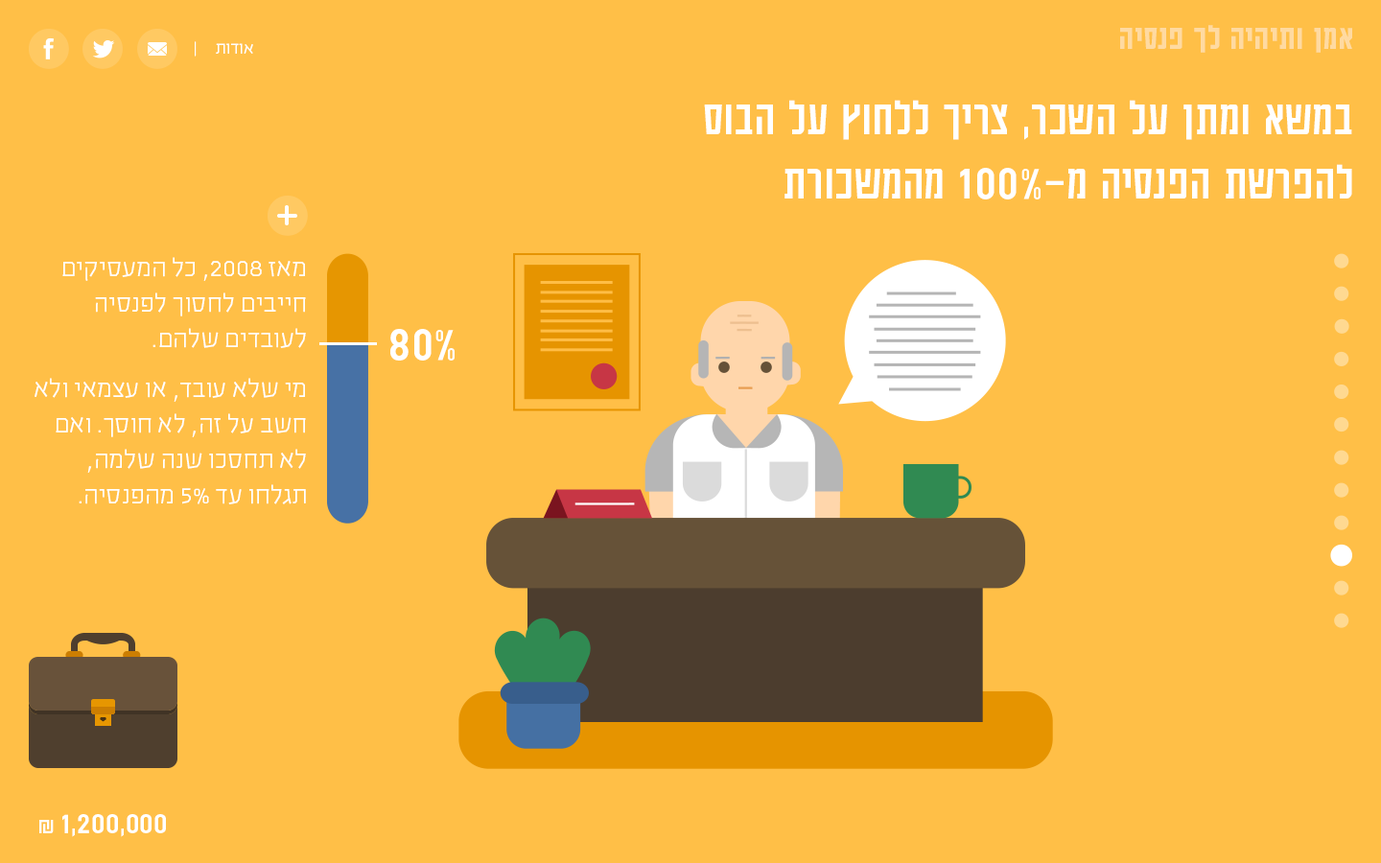
<style>
.page{position:relative;width:1381px;height:863px;background:#ffbf47}
.page>*{position:absolute;margin:0}
.t1{font:37.8px "AdumaFOT-Medium";color:#ffdaa1}
.t2{font:19.2px "EzerBlock_OE-Light";color:#ffffff}
.t3{font:53.8px "AdumaFOT-Regular";color:#ffffff}
.t4{font:28.8px/35.5px "EzerBlock_OE-Light";color:#ffffff}
.t5{font:33.6px "AdumaFOT-Regular";color:#ffffff}
.t6{font:24px "AdumaFOT-Regular";color:#ffffff}
</style>
<div class="page">
<p class="t1" style="left:1120px;top:25px;width:232px;height:28px">אמן ותיהיה לך פנסיה</p>
<p class="t2" style="left:195px;top:41px;width:58px;height:16px">אודות     |</p>
<p class="t3" style="left:704px;top:100px;width:648px;height:100px">במשא ומתן על השכר, צריך ללחוץ על הבוס <br>להפרשת הפנסיה מ-100% מהמשכורת</p>
<p class="t4" style="left:35px;top:257px;width:271px;height:248px">מאז 2008, כל המעסיקים חייבים לחסוך לפנסיה לעובדים שלהם.<br><br>מי שלא עובד, או עצמאי ולא חשב על זה, לא חוסך. ואם לא תחסכו שנה שלמה, תגלחו עד 5% מהפנסיה.</p>
<p class="t3" style="left:390px;top:329px;width:65px;height:32px">80%</p>
<p class="t5" style="left:39px;top:814px;width:127px;height:23px">1,200,000 <span class="t6">₪</span></p>
</div>
